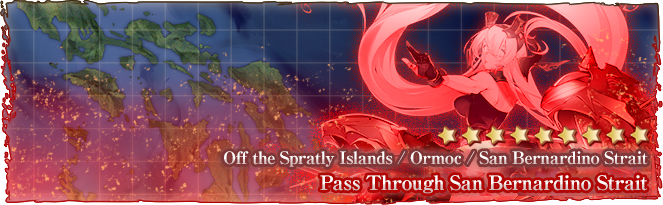
<style>
.page{position:relative;width:663px;height:205px}
.page>*{position:absolute;margin:0}
.t1{font:17px "RyuminPro-ExBold";letter-spacing:-0.04em}
.t2{font:20px "RyuminPro-ExBold";letter-spacing:-0.04em}
</style>
<div class="page">
<p class="t1" style="left:224px;top:151px;width:424px;height:16px">Off the Spratly Islands / Ormoc / San Bernardino Strait</p>
<p class="t2" style="left:320px;top:175px;width:327px;height:19px">Pass Through San Bernardino Strait</p>
</div>
